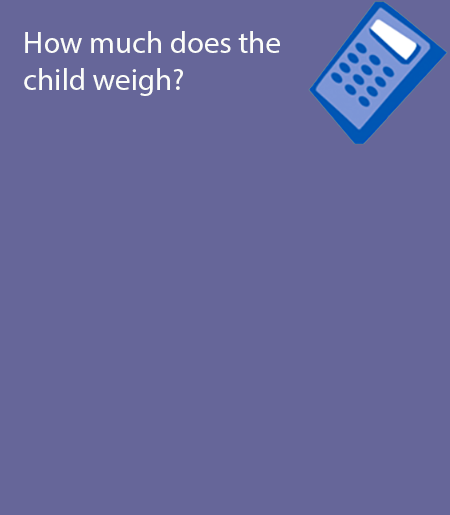
<style>
.page{position:relative;width:450px;height:515px;background:#666699}
.page>*{position:absolute;margin:0}
.t1{font:30.9px "MyriadPro-Regular";color:#fbfcf9}
</style>
<div class="page">
<p class="t1" style="left:24px;top:31px;width:256px;height:65px">How much does the child weigh?</p>
</div>
